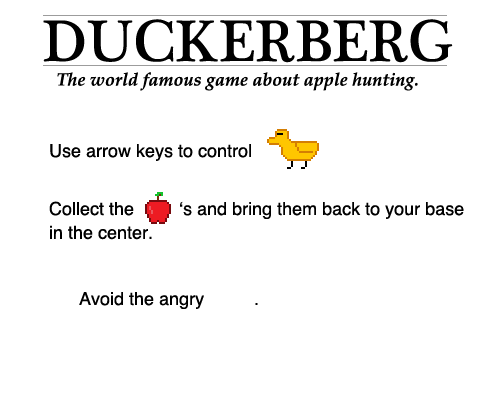
<style>
.page{position:relative;width:500px;height:400px;background:#ffffff}
.page>*{position:absolute;margin:0}
.t1{font:60px "PlantagenetCherokee";color:#000000}
.t2{font:18px "Palatino-BoldItalic";color:#000000}
.t3{font:18px "Helvetica";color:#000000}
</style>
<div class="page">
<p class="t1" style="left:43px;top:19px;width:410px;height:44px">DUCKERBERG</p>
<p class="t2" style="left:57px;top:72px;width:361px;height:19px">The world famous game about apple hunting.</p>
<p class="t3" style="left:50px;top:144px;width:201px;height:17px">Use arrow keys to control</p>
<p class="t3" style="left:49px;top:201px;width:415px;height:39px">Collect the         ‘s and bring them back to your base<br>in the center.</p>
<p class="t3" style="left:79px;top:292px;width:179px;height:17px">Avoid the angry          .</p>
</div>
